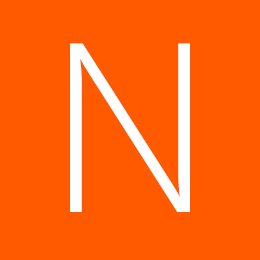
<style>
.page{position:relative;width:260px;height:260px;background:#ff5a00}
.page>*{position:absolute;margin:0}
.t1{font:250px "SukhumvitSet-Thin";color:#ffffff}
</style>
<div class="page">
<p class="t1" style="left:70px;top:43px;width:120px;height:169px">N</p>
</div>
